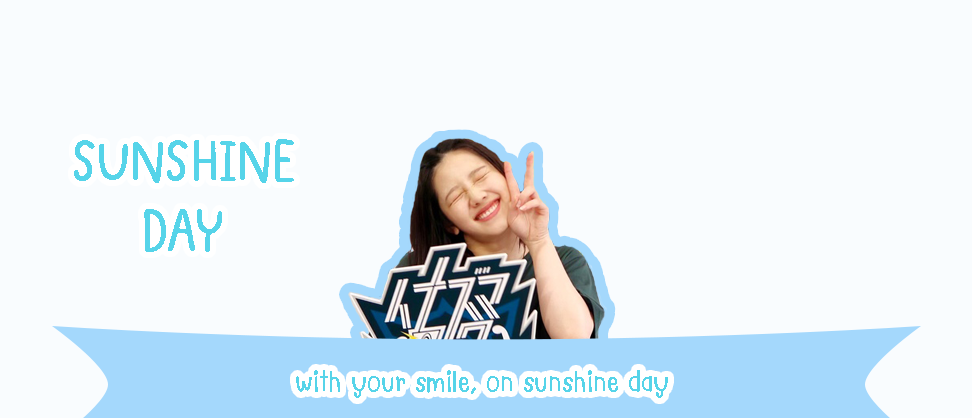
<style>
.page{position:relative;width:972px;height:418px;background:#f9fcfe}
.page>*{position:absolute;margin:0}
.t1{font:60px "MNPANGPING-Bold";color:#56d4e9}
.t2{font:30px "MNPANGPING-Bold";color:#56d4e9}
</style>
<div class="page">
<p class="t1" style="left:74px;top:139px;width:220px;height:44px">SUNSHINE</p>
<p class="t1" style="left:144px;top:209px;width:78px;height:43px">DAY</p>
<p class="t2" style="left:296px;top:370px;width:372px;height:28px">with your smile, on sunshine day</p>
</div>
